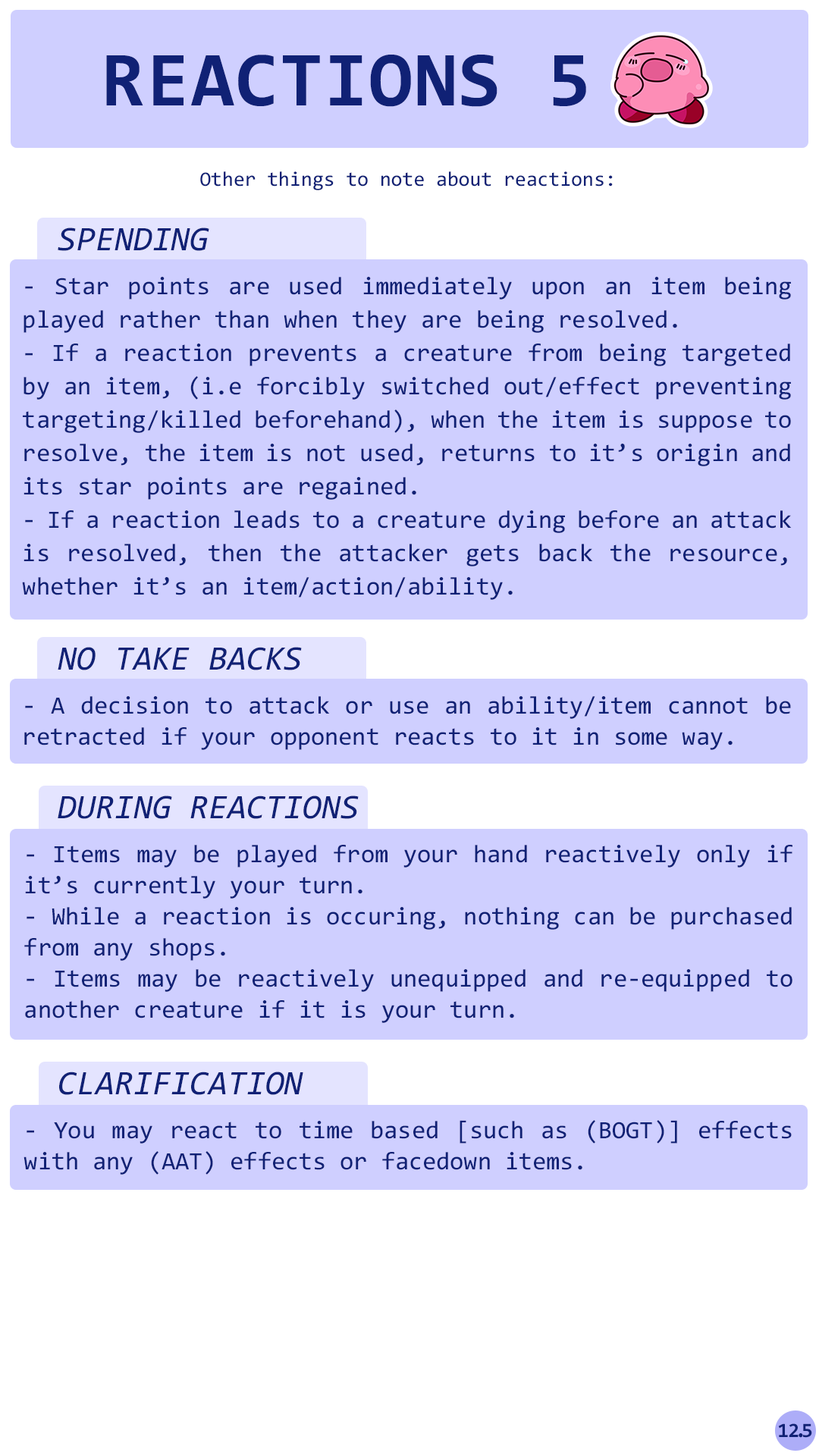
<style>
.page{position:relative;width:819px;height:1456px;background:#cfcfff}
.page>*{position:absolute;margin:0}
.t1{font:78.3px "Consolas-Bold";letter-spacing:0.02em;color:#102175}
.t2{font:20.5px "Consolas";color:#102175}
.t3{font:34.3px "Consolas-Italic";color:#102175}
.t4{font:25px/33.4px "Consolas";color:#102175}
.t5{font:25px/31.1px "Consolas";color:#102175}
.t6{font:20.5px "Consolas-Bold";letter-spacing:-0.06em;color:#102175}
.t7{font:20.5px "Consolas-Bold";letter-spacing:-0.2em;color:#102175}
.t8{font:20.5px "Consolas-Bold";letter-spacing:-0.22em;color:#102175}
</style>
<div class="page">
<p class="t1" style="left:106px;top:55px;width:480px;height:52px">REACTIONS 5</p>
<p class="t2" style="left:200px;top:171px;width:413px;height:19px">Other things to note about reactions:</p>
<p class="t3" style="left:58px;top:227px;width:151px;height:24px">SPENDING</p>
<p class="t4" style="left:22px;top:277px;width:770px;height:323px;text-align:justify">- Star points are used immediately upon an item being played rather than when they are being resolved.<br>- If a reaction prevents a creature from being targeted by an item, (i.e forcibly switched out/effect preventing targeting/killed beforehand), when the item is suppose to resolve, the item is not used, returns to it’s origin and its star points are regained.<br>- If a reaction leads to a creature dying before an attack is resolved, then the attacker gets back the resource, whether it’s an item/action/ability.</p>
<p class="t3" style="left:58px;top:647px;width:244px;height:23px">NO TAKE BACKS</p>
<p class="t5" style="left:24px;top:696px;width:767px;height:54px;text-align:justify">- A decision to attack or use an ability/item cannot be retracted if your opponent reacts to it in some way.</p>
<p class="t3" style="left:58px;top:795px;width:301px;height:24px">DURING REACTIONS</p>
<p class="t5" style="left:24px;top:845px;width:768px;height:178px;text-align:justify">- Items may be played from your hand reactively only if it’s currently your turn.<br>- While a reaction is occuring, nothing can be purchased from any shops.<br>- Items may be reactively unequipped and re-equipped to another creature if it is your turn.</p>
<p class="t3" style="left:59px;top:1072px;width:244px;height:23px">CLARIFICATION</p>
<p class="t5" style="left:24px;top:1120px;width:768px;height:55px;text-align:justify">- You may react to time based [such as (BOGT)] effects with any (AAT) effects or facedown items.</p>
<p class="t6" style="left:778px;top:1423px;width:34px;height:15px">1<span class="t7">2</span><span class="t8">.</span>5</p>
</div>
